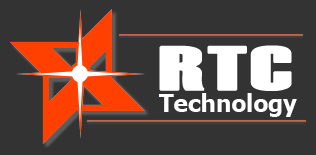
<style>
.page{position:relative;width:316px;height:155px;background:#333333}
.page>*{position:absolute;margin:0}
.t1{font:60.6px "Haettenschweiler";color:#ffffff;font-weight:bold;scale:1.87 1}
.t2{font:24px "Tahoma-Bold";color:#ffffff}
</style>
<div class="page">
<p class="t1" style="left:159px;top:45px;width:133px;height:46px">RTC</p>
<p class="t2" style="left:159px;top:93px;width:138px;height:24px">Technology</p>
</div>
